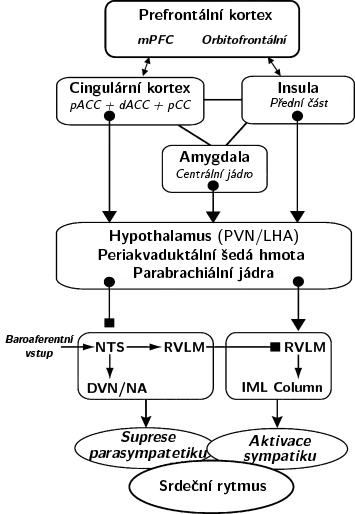
<style>
.page{position:relative;width:355px;height:514px;background:#ffffff}
.page>*{position:absolute;margin:0}
.t1{font:15.7px "LMSans10-Bold";color:#000000}
.t2{font:12.6px "LMSans10-BoldOblique";color:#000000}
.t3{font:12.6px "LMSans10-Oblique";color:#000000}
.t4{font:15.7px "LMSans10-Regular";color:#000000}
.t5{font:11px "LMSans10-BoldOblique";color:#000000}
.t6{font:14.1px "LMSans10-Bold";color:#000000}
.t7{font:15.7px/15.7px "LMSans10-BoldOblique";color:#000000}
</style>
<div class="page">
<p class="t1" style="left:139px;top:9px;width:133px;height:11px">Prefrontální kortex</p>
<p class="t2" style="left:138px;top:35px;width:36px;height:9px">mPFC</p>
<p class="t2" style="left:202px;top:35px;width:86px;height:9px">Orbitofrontální</p>
<p class="t1" style="left:70px;top:82px;width:120px;height:15px">Cingulární kortex</p>
<p class="t1" style="left:278px;top:82px;width:40px;height:11px">Insula</p>
<p class="t3" style="left:70px;top:100px;width:121px;height:12px">pACC + dACC + pCC</p>
<p class="t3" style="left:270px;top:98px;width:58px;height:10px">Přední část</p>
<p class="t1" style="left:179px;top:151px;width:70px;height:15px">Amygdala</p>
<p class="t3" style="left:176px;top:169px;width:77px;height:12px">Centrální jádro</p>
<p class="t1" style="left:110px;top:229px;width:188px;height:16px">Hypothalamus <span class="t4">(PVN/LHA)</span></p>
<p class="t1" style="left:98px;top:249px;width:206px;height:11px">Periakvaduktální šedá hmota</p>
<p class="t1" style="left:134px;top:267px;width:140px;height:15px">Parabrachiální jádra</p>
<p class="t5" style="left:5px;top:335px;width:69px;height:24px;text-align:center">Baroaferentní<br>vstup</p>
<p class="t6" style="left:96px;top:342px;width:28px;height:10px">NTS</p>
<p class="t6" style="left:164px;top:342px;width:40px;height:10px">RVLM</p>
<p class="t6" style="left:285px;top:342px;width:40px;height:10px">RVLM</p>
<p class="t6" style="left:87px;top:382px;width:60px;height:15px">DVN/NA</p>
<p class="t6" style="left:242px;top:382px;width:80px;height:10px">IML Column</p>
<p class="t7" style="left:89px;top:431px;width:118px;height:31px;text-align:center">Suprese<br>parasympatetiku</p>
<p class="t7" style="left:243px;top:435px;width:74px;height:30px;text-align:center">Aktivace<br>sympatiku</p>
<p class="t1" style="left:159px;top:480px;width:107px;height:15px">Srdeční rytmus</p>
</div>
